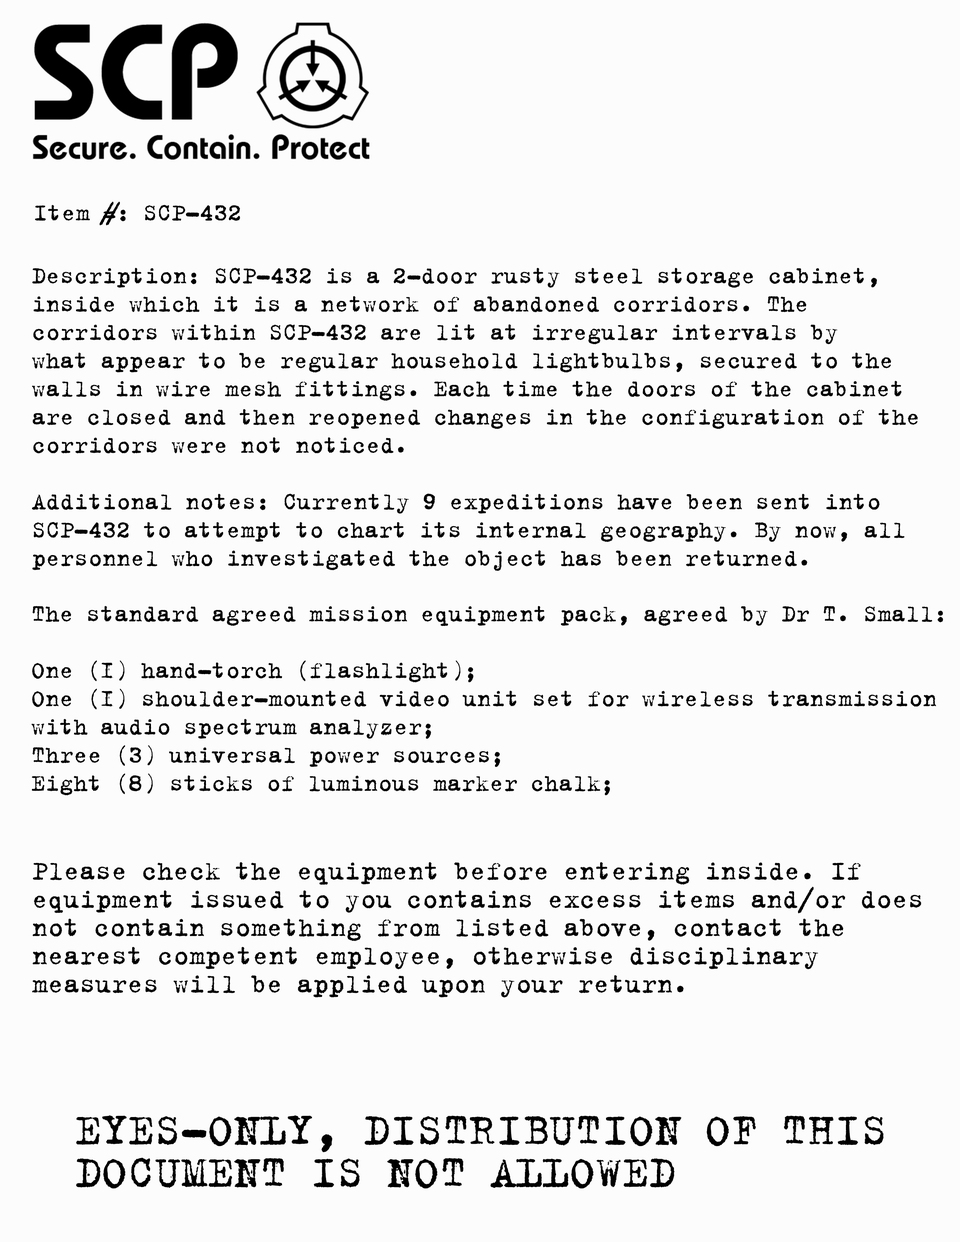
<style>
.page{position:relative;width:960px;height:1242px;background:#fcfcfc}
.page>*{position:absolute;margin:0}
.t1{font:25.1px "B52";color:#000000}
.t2{font:25.1px/28.2px "B52";color:#000000}
.t3{font:28.2px/28.2px "B52";color:#000000}
.t4{font:47.1px/42.4px "B52";color:#000000}
</style>
<div class="page">
<p class="t1" style="left:35px;top:202px;width:205px;height:23px">Item #: SCP-432</p>
<p class="t2" style="left:32px;top:268px;width:886px;height:303px">Description: SCP-432 is a 2-door rusty steel storage cabinet, <br>inside which it is a network of abandoned corridors. The <br>corridors within SCP-432 are lit at irregular intervals by <br>what appear to be regular household lightbulbs, secured to the <br>walls in wire mesh fittings. Each time the doors of the cabinet <br>are closed and then reopened changes in the configuration of the <br>corridors were not noticed.<br><br>Additional notes: Currently 9 expeditions have been sent into <br>SCP-432 to attempt to chart its internal geography. By now, all <br>personnel who investigated the object has been returned.</p>
<p class="t2" style="left:31px;top:606px;width:912px;height:190px">The standard agreed mission equipment pack, agreed by Dr T. Small:<br><br>One (1) hand-torch (flashlight);<br>One (1) shoulder-mounted video unit set for wireless transmission <br>with audio spectrum analyzer;<br>Three (3) universal power sources;<br>Eight (8) sticks of luminous marker chalk;</p>
<p class="t3" style="left:32px;top:862px;width:889px;height:136px">Please check the equipment before entering inside. If <br>equipment issued to you contains excess items and/or does <br>not contain something from listed above, contact the <br>nearest competent employee, otherwise disciplinary <br>measures will be applied upon your return.</p>
<p class="t4" style="left:76px;top:1115px;width:808px;height:74px">EYES-ONLY, DISTRIBUTION OF THIS <br>DOCUMENT IS NOT ALLOWED</p>
</div>
